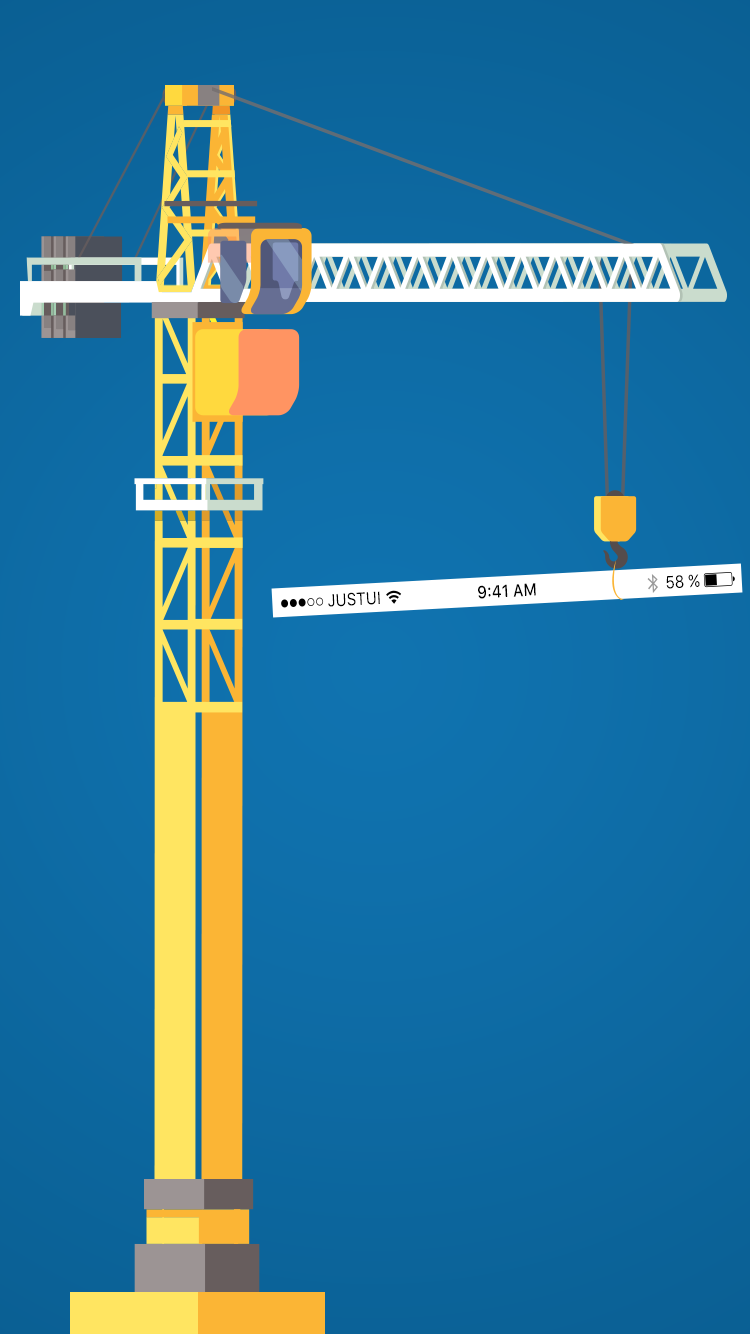
<style>
.page{position:relative;width:750px;height:1334px}
.page>*{position:absolute;margin:0}
.t1{font:17.4px "SFUIText-Regular";color:#000000;scale:0.86 1}
.t2{font:17.4px "SFUIText-Medium";color:#000000;scale:0.86 1}
</style>
<div class="page">
<p class="t1" style="left:666px;top:574px;width:34px;height:15px;rotate:-3deg">58 %</p>
<p class="t1" style="left:328px;top:591px;width:52px;height:16px;rotate:-3deg">JUSTUI</p>
<p class="t2" style="left:478px;top:583px;width:58px;height:16px;rotate:-3deg">9:41 AM</p>
</div>
